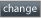
<style>
.page{position:relative;width:41px;height:18px}
.page>*{position:absolute;margin:0}
.t1{font:11px "MyriadPro-Regular";color:#f9f9f9}
</style>
<div class="page">
<p class="t1" style="left:3px;top:4px;width:34px;height:11px">change</p>
</div>
